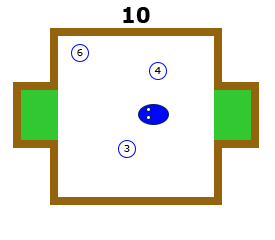
<style>
.page{position:relative;width:275px;height:240px;background:#ffffff}
.page>*{position:absolute;margin:0}
.t1{font:21px "Verdana-Bold";color:#000000}
.t2{font:10px "Verdana";color:#000000}
</style>
<div class="page">
<p class="t1" style="left:123px;top:7px;width:27px;height:16px">10</p>
<p class="t2" style="left:77px;top:49px;width:6px;height:7px">6</p>
<p class="t2" style="left:154px;top:67px;width:7px;height:7px">4</p>
<p class="t2" style="left:124px;top:145px;width:6px;height:7px">3</p>
</div>
